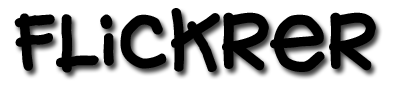
<style>
.page{position:relative;width:400px;height:89px;background:#ffffff}
.page>*{position:absolute;margin:0}
.t1{font:80px "WallowHmkBold";color:#000000}
</style>
<div class="page">
<p class="t1" style="left:14px;top:8px;width:362px;height:65px">flickrer</p>
</div>
